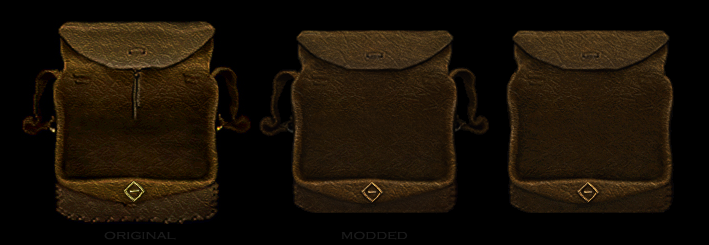
<style>
.page{position:relative;width:709px;height:245px;background:#000000}
.page>*{position:absolute;margin:0}
.t1{font:12.8px "CopperplateGothic-Light";color:#1a1a1a;scale:1.25 1}
</style>
<div class="page">
<p class="t1" style="left:104px;top:231px;width:72px;height:9px">original</p>
<p class="t1" style="left:341px;top:231px;width:67px;height:9px">modded</p>
</div>
